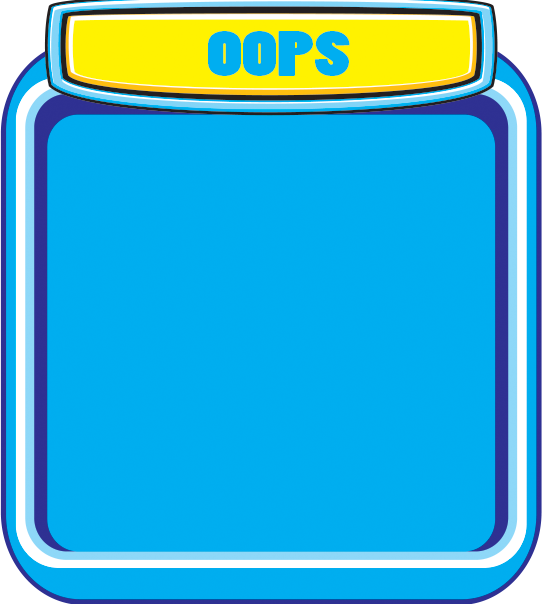
<style>
.page{position:relative;width:542px;height:604px;background:#00aeef}
.page>*{position:absolute;margin:0}
.t1{font:60px "PoplarStd";color:#00aef0;scale:1.31 1}
</style>
<div class="page">
<p class="t1" style="left:208px;top:31px;width:142px;height:45px">OOPS</p>
</div>
